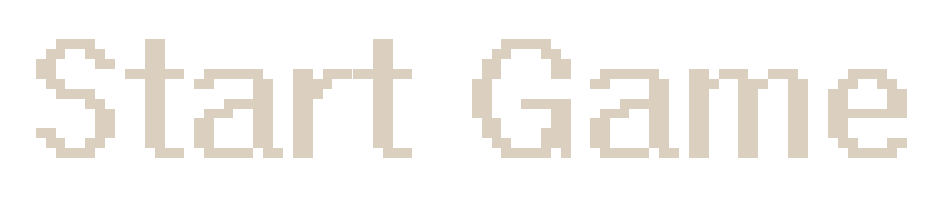
<style>
.page{position:relative;width:933px;height:206px;background:#ffffff}
.page>*{position:absolute;margin:0}
.t1{font:158.3px "System";color:#dbd0c0}
</style>
<div class="page">
<p class="t1" style="left:36px;top:39px;width:871px;height:119px">Start Game</p>
</div>
